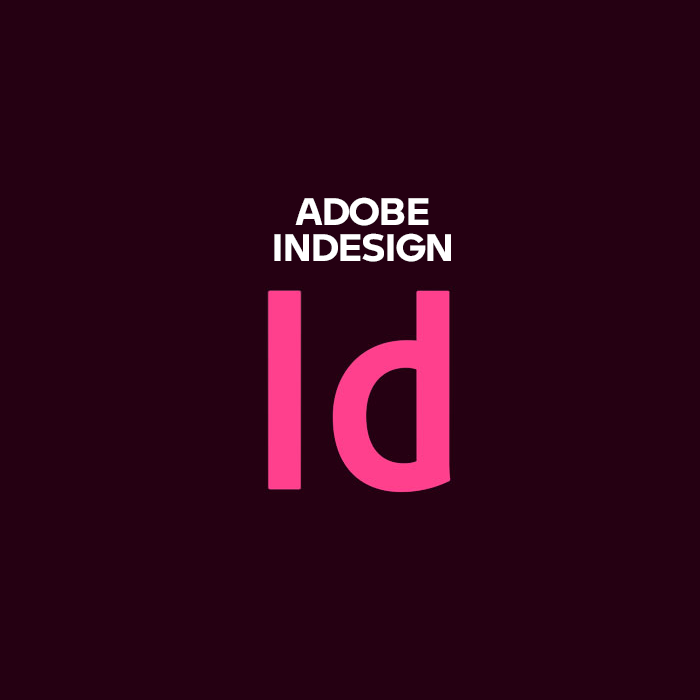
<style>
.page{position:relative;width:700px;height:700px;background:#250012}
.page>*{position:absolute;margin:0}
.t1{font:37.4px/36.3px "BMWMotorradW05-Bold";color:#ffffff}
</style>
<div class="page">
<p class="t1" style="left:274px;top:197px;width:177px;height:65px;text-align:center">ADOBE<br>INDESIGN</p>
</div>
